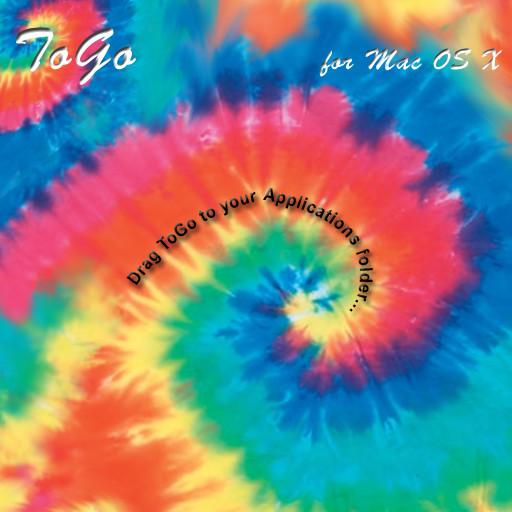
<style>
.page{position:relative;width:512px;height:512px}
.page>*{position:absolute;margin:0}
.t1{font:30px "BrushScriptStd";letter-spacing:0.04em;scale:0.9 1}
.t2{font:60px "BrushScriptStd";letter-spacing:0.04em;scale:0.9 1}
.t3{font:18px/35.4px "Arial-BoldMT";letter-spacing:0.04em;color:#000000;scale:0.9 1}
</style>
<div class="page">
<p class="t1" style="left:16px;top:27px;width:486px;height:58px"><span class="t2">ToGo</span>                  for Mac OS X</p>
<p class="t3" style="left:126px;top:187px;width:247px;height:125px">Drag ToGo to your Applications folder...</p>
</div>
